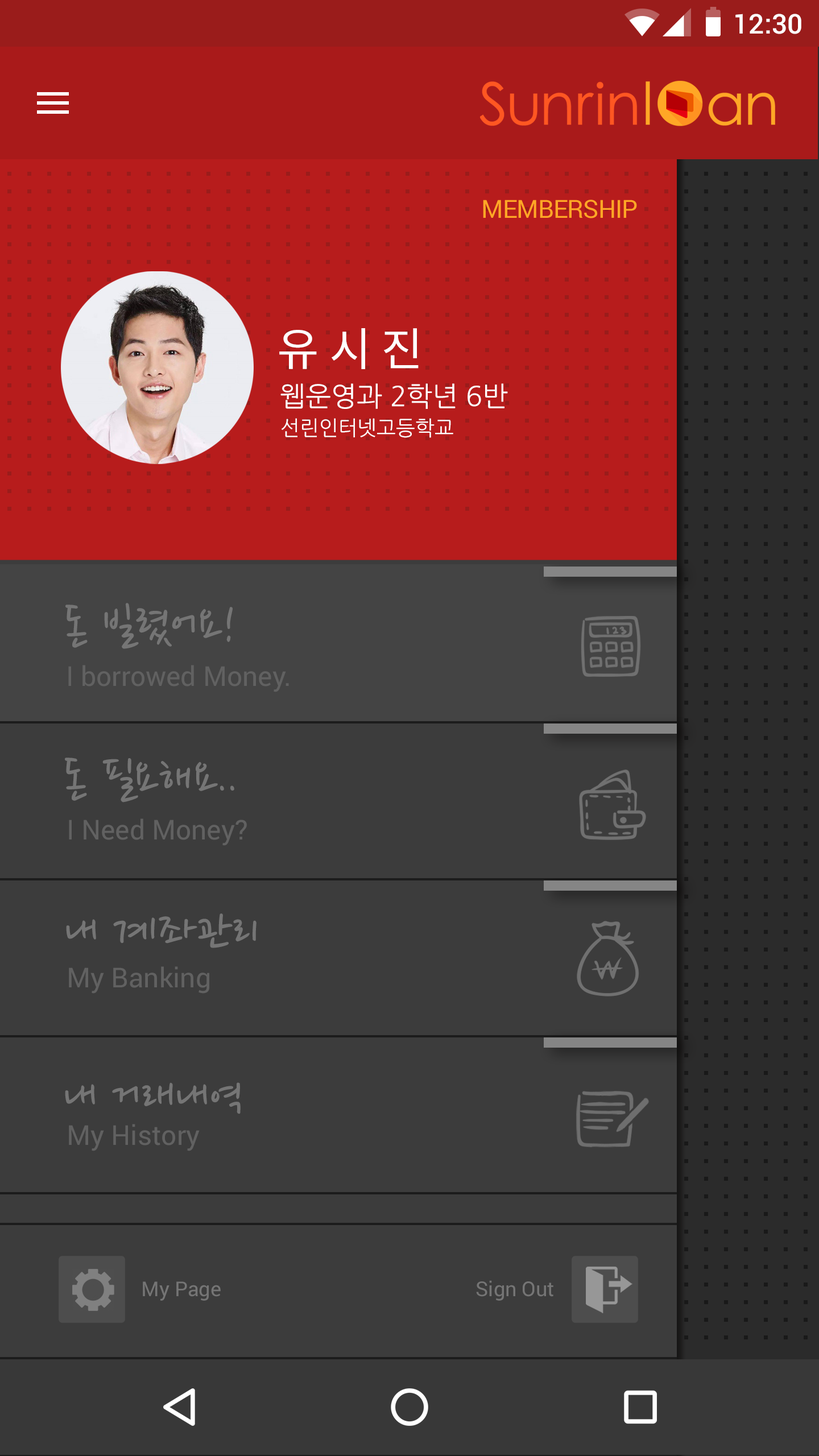
<style>
.page{position:relative;width:819px;height:1456px;background:#3c3c3c}
.page>*{position:absolute;margin:0}
.t1{font:27.3px "Roboto-Medium";color:#ffffff}
.t2{font:45.5px "NotoSansCJKkr-Regular";color:#ffffff}
.t3{font:27.3px "NanumGothic";color:#ffffff}
.t4{font:20.5px "NanumGothic";color:#ffffff}
.t5{font:51.2px "NanumPen";color:#757575}
.t6{font:27.3px "Roboto-Regular";color:#616161}
.t7{font:20.5px "Roboto-Regular";color:#757575}
</style>
<div class="page">
<p class="t1" style="left:735px;top:14px;width:66px;height:20px">12:30</p>
<p class="t2" style="left:279px;top:328px;width:140px;height:41px">유 시 진</p>
<p class="t3" style="left:280px;top:383px;width:228px;height:26px">웹운영과 2학년 6반</p>
<p class="t4" style="left:282px;top:418px;width:171px;height:20px">선린인터넷고등학교</p>
<p class="t5" style="left:65px;top:603px;width:168px;height:46px">돈 빌렸어요!</p>
<p class="t6" style="left:68px;top:665px;width:221px;height:27px">I borrowed Money.</p>
<p class="t5" style="left:65px;top:758px;width:169px;height:44px">돈 필요해요..</p>
<p class="t6" style="left:69px;top:818px;width:178px;height:28px">I Need Money?</p>
<p class="t5" style="left:66px;top:913px;width:191px;height:35px">내 계좌관리</p>
<p class="t6" style="left:69px;top:966px;width:140px;height:28px">My Banking</p>
<p class="t5" style="left:65px;top:1082px;width:176px;height:32px">내 거래내역</p>
<p class="t6" style="left:69px;top:1124px;width:131px;height:27px">My History</p>
<p class="t7" style="left:143px;top:1281px;width:78px;height:20px">My Page</p>
<p class="t7" style="left:476px;top:1280px;width:77px;height:21px">Sign Out</p>
</div>
